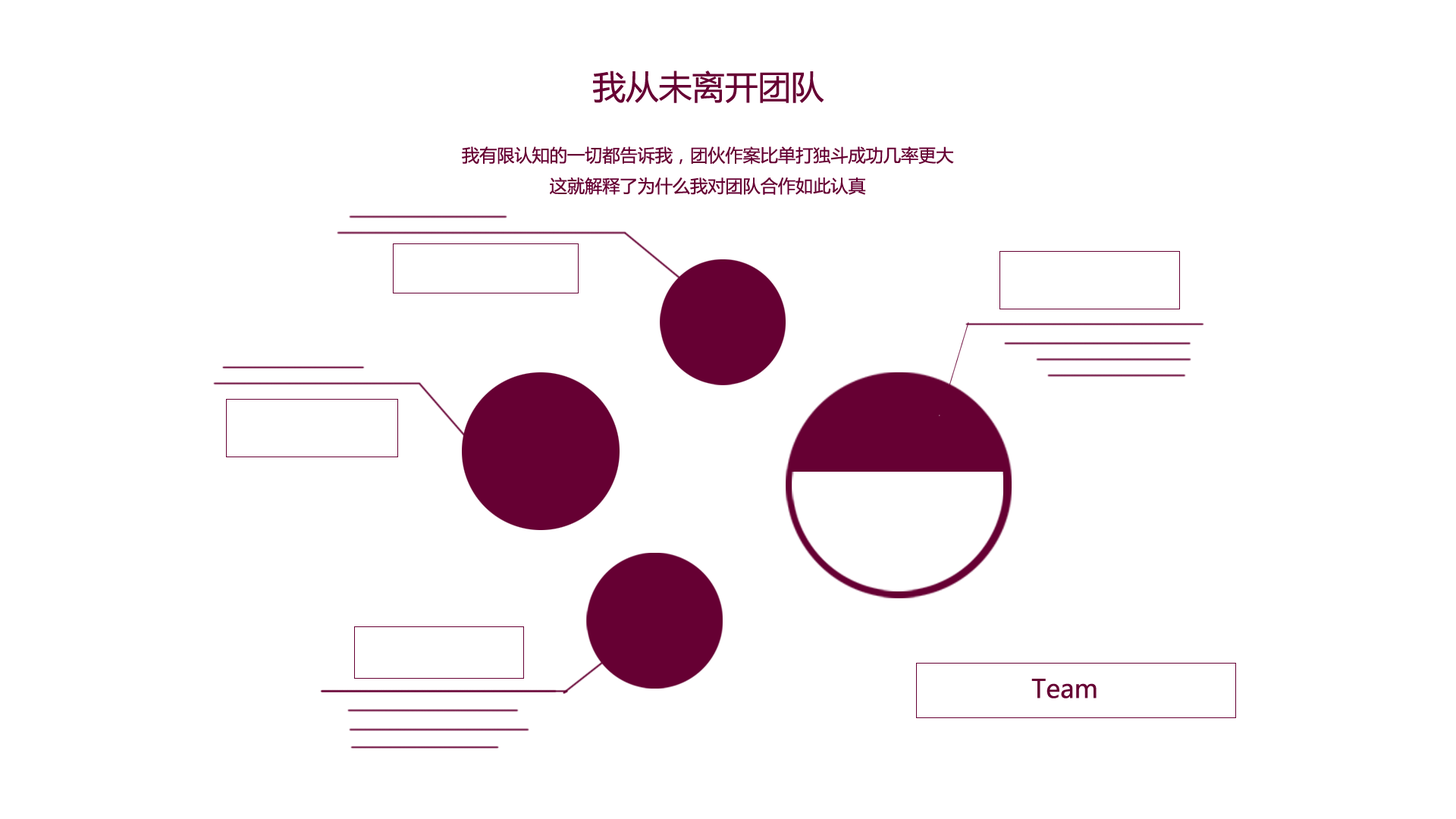
<style>
.page{position:relative;width:1456px;height:819px;background:#ffffff}
.page>*{position:absolute;margin:0}
.t1{font:33.1px "MicrosoftYaHei";color:#660033}
.t2{font:17.6px "MicrosoftYaHei";color:#660033}
.t3{font:25.3px "MicrosoftYaHei";color:#660033}
</style>
<div class="page">
<p class="t1" style="left:593px;top:71px;width:231px;height:32px">我从未离开团队</p>
<p class="t2" style="left:462px;top:146px;width:492px;height:49px;text-align:center">我有限认知的一切都告诉我，团伙作案比单打独斗成功几率更大<br>这就解释了为什么我对团队合作如此认真</p>
<p class="t3" style="left:1031px;top:679px;width:66px;height:19px">Team</p>
</div>
